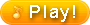
<style>
.page{position:relative;width:90px;height:25px}
.page>*{position:absolute;margin:0}
.t1{font:18px "ArialMT";letter-spacing:0.1em;color:#ffffff}
</style>
<div class="page">
<p class="t1" style="left:29px;top:3px;width:50px;height:21px">Play!</p>
</div>
